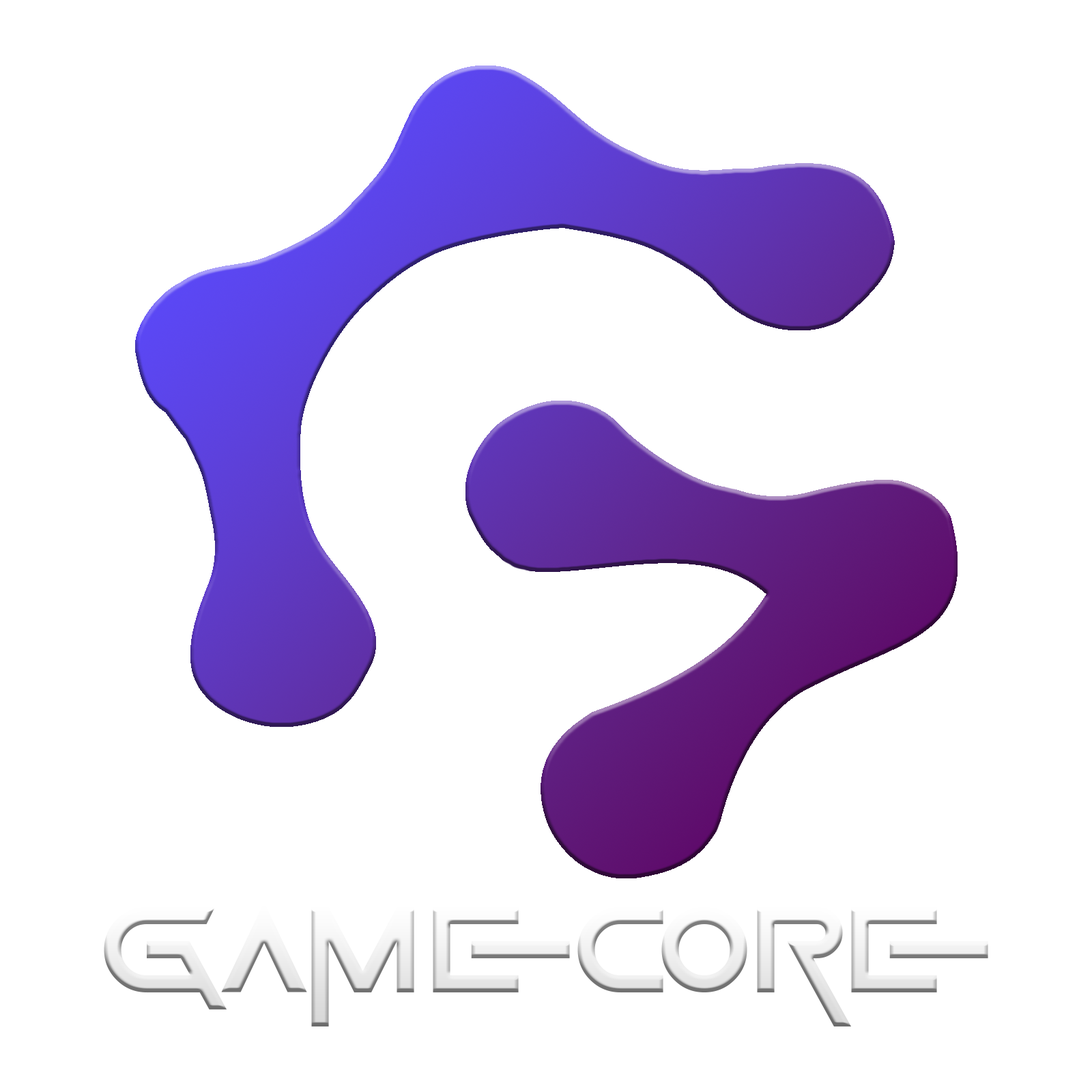
<style>
.page{position:relative;width:1092px;height:1092px;background:#ffffff}
.page>*{position:absolute;margin:0}
.t1{font:136.5px "GameOfSquids";color:#ebebeb}
</style>
<div class="page">
<p class="t1" style="left:104px;top:902px;width:884px;height:124px">GameCore</p>
</div>
